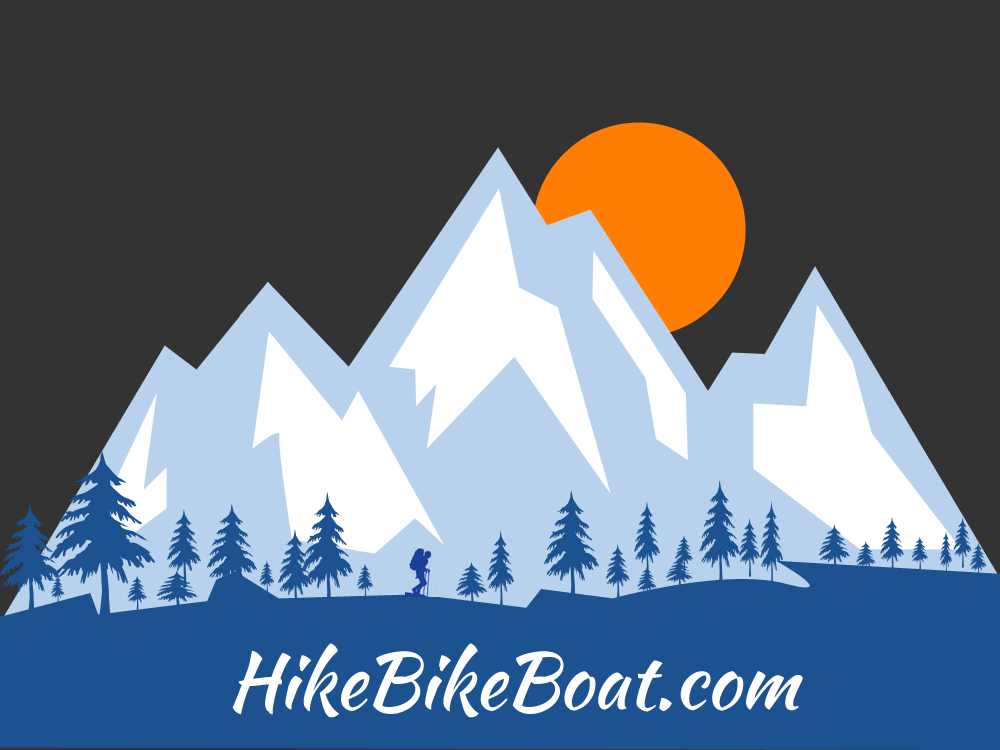
<style>
.page{position:relative;width:1000px;height:750px;background:#333333}
.page>*{position:absolute;margin:0}
.t1{font:77.4px "KaushanScript-Regular";color:#ffffff}
</style>
<div class="page">
<p class="t1" style="left:232px;top:643px;width:571px;height:75px">HikeBikeBoat.com</p>
</div>
